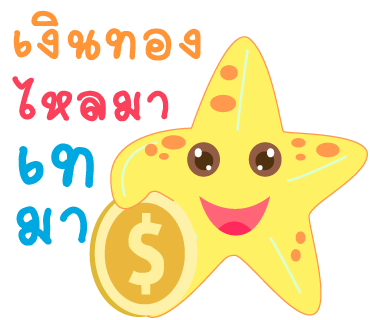
<style>
.page{position:relative;width:370px;height:320px;background:#ffffff}
.page>*{position:absolute;margin:0}
.t1{font:83px "2005_iannnnnMTV";letter-spacing:0.025em;color:#ff9537;scale:1.06 1}
.t2{font:83px "2005_iannnnnMTV";letter-spacing:0.025em;color:#fa405a;scale:1.06 1}
.t3{font:118px "2005_iannnnnMTV";letter-spacing:0.025em;color:#00a8e1;scale:1.06 1}
.t4{font:106px "2005_iannnnnMTV";letter-spacing:0.025em;color:#00a8e1;scale:1.06 1}
</style>
<div class="page">
<p class="t1" style="left:13px;top:10px;width:188px;height:51px">เงินทอง</p>
<p class="t2" style="left:12px;top:76px;width:157px;height:46px">ไหลมา</p>
<p class="t3" style="left:18px;top:143px;width:76px;height:45px">เท</p>
<p class="t4" style="left:16px;top:206px;width:71px;height:40px">มา</p>
</div>
